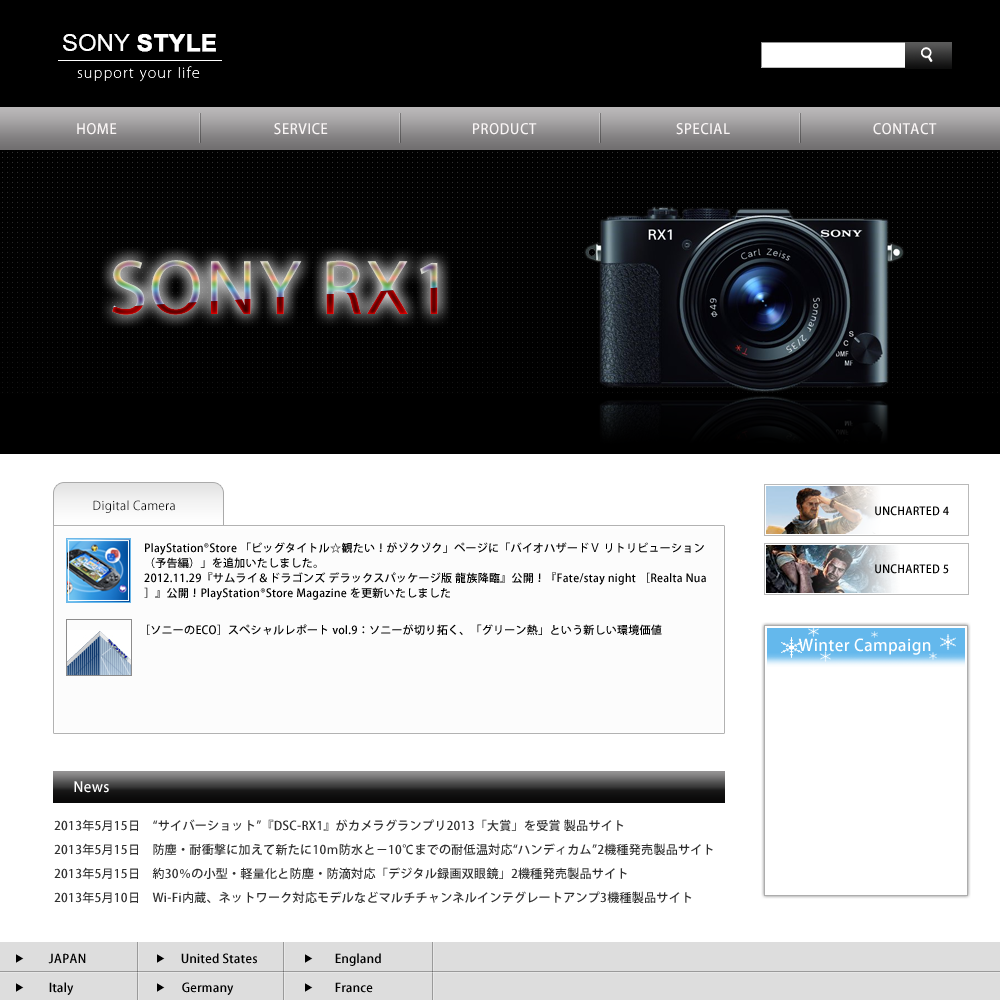
<style>
.page{position:relative;width:1000px;height:1000px;background:#ffffff}
.page>*{position:absolute;margin:0}
.t1{font:24px "Arial-BoldMT";color:#ffffff;font-weight:bold}
.t2{font:24px "ArialMT";color:#ffffff}
.t3{font:14px "KozGoPr6N-ExtraLight";letter-spacing:0.1em;color:#ffffff}
.t4{font:78.3px "MyriadPro-Regular";letter-spacing:0.025em}
.t5{font:12px "KozGoPr6N-Regular";letter-spacing:0.025em;color:#000000}
.t6{font:11px "KozGoPr6N-Medium";letter-spacing:0.025em;color:#000000}
.t7{font:11px/15px "KozGoPr6N-Medium";letter-spacing:0.025em;color:#000000}
.t8{font:16px "KozGoPr6N-Medium";letter-spacing:0.025em;color:#ffffff}
.t9{font:14px "KozGoPr6N-Medium";letter-spacing:0.025em;color:#ffffff}
.t10{font:12px/24px "KozGoPr6N-Medium";letter-spacing:0.025em;color:#2f2f2f}
.t11{font:12px "KozGoPr6N-Medium";letter-spacing:0.025em;color:#000000}
</style>
<div class="page">
<p class="t1" style="left:63px;top:34px;width:153px;height:18px"><span class="t2">SONY </span>STYLE</p>
<p class="t3" style="left:77px;top:66px;width:123px;height:16px">support your life</p>
<p class="t4" style="left:112px;top:260px;width:326px;height:55px">SONY RX1</p>
<p class="t5" style="left:93px;top:500px;width:82px;height:13px">Digital Camera</p>
<p class="t6" style="left:875px;top:506px;width:74px;height:10px">UNCHARTED 4</p>
<p class="t7" style="left:144px;top:542px;width:562px;height:58px">PlayStation®Store 「ビッグタイトル☆観たい！がゾクゾク」ページに「バイオハザードⅤ リトリビューション（予告編）」を追加いたしました。<br>2012.11.29『サムライ＆ドラゴンズ デラックスパッケージ版 龍族降臨』公開！『Fate/stay night ［Realta Nua］』公開！PlayStation®Store Magazine を更新いたしました</p>
<p class="t6" style="left:875px;top:564px;width:74px;height:10px">UNCHARTED 5</p>
<p class="t6" style="left:147px;top:624px;width:515px;height:11px">［ソニーのECO］スペシャルレポート vol.9：ソニーが切り拓く、「グリーン熱」という新しい環境価値</p>
<p class="t8" style="left:798px;top:638px;width:133px;height:17px">Winter Campaign</p>
<p class="t9" style="left:74px;top:781px;width:35px;height:12px">News</p>
<p class="t10" style="left:54px;top:819px;width:659px;height:85px">2013年5月15日　“サイバーショット”『DSC-RX1』がカメラグランプリ2013「大賞」を受賞 製品サイト<br>2013年5月15日　防塵・耐衝撃に加えて新たに10ｍ防水と－10℃までの耐低温対応“ハンディカム”2機種発売製品サイト<br>2013年5月15日　約30％の小型・軽量化と防塵・防滴対応「デジタル録画双眼鏡」2機種発売製品サイト<br>2013年5月10日　Wi-Fi内蔵、ネットワーク対応モデルなどマルチチャンネルインテグレートアンプ3機種製品サイト</p>
<p class="t11" style="left:48px;top:953px;width:38px;height:11px">JAPAN</p>
<p class="t11" style="left:181px;top:953px;width:76px;height:11px">United States</p>
<p class="t11" style="left:335px;top:953px;width:46px;height:13px">England</p>
<p class="t11" style="left:49px;top:982px;width:25px;height:13px">Italy</p>
<p class="t11" style="left:182px;top:982px;width:52px;height:13px">Germany</p>
<p class="t11" style="left:335px;top:982px;width:38px;height:11px">France</p>
</div>
